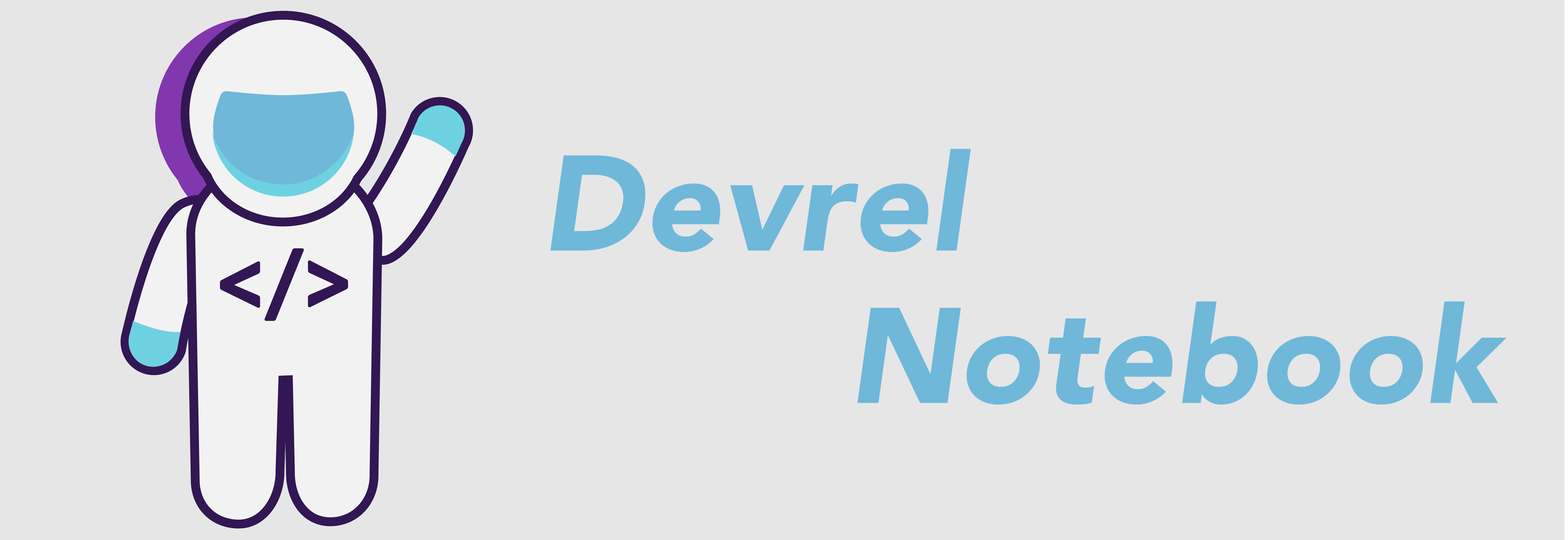
<style>
.page{position:relative;width:1568px;height:540px;background:#e6e6e6}
.page>*{position:absolute;margin:0}
.t1{font:134.1px "Avenir-BlackOblique";letter-spacing:0.005em;color:#6fb8d9}
</style>
<div class="page">
<p class="t1" style="left:550px;top:148px;width:421px;height:104px">Devrel</p>
<p class="t1" style="left:857px;top:301px;width:650px;height:104px">Notebook</p>
</div>
